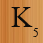
<style>
.page{position:relative;width:43px;height:43px}
.page>*{position:absolute;margin:0}
.t1{font:30px "TimesNewRomanPSMT";color:#0c0c0b}
.t2{font:12px "TimesNewRomanPSMT";color:#0c0c0b}
</style>
<div class="page">
<p class="t1" style="left:11px;top:7px;width:22px;height:20px">K</p>
<p class="t2" style="left:33px;top:28px;width:5px;height:9px">5</p>
</div>
